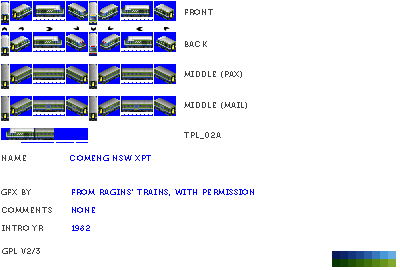
<style>
.page{position:relative;width:400px;height:270px;background:#ffffff}
.page>*{position:absolute;margin:0}
.t1{font:8px "Museo700-Regular";letter-spacing:0.075em;color:#404040;text-transform:uppercase}
.t2{font:8px "Museo700-Regular";letter-spacing:0.075em;color:#0000ff;text-transform:uppercase}
</style>
<div class="page">
<p class="t1" style="left:185px;top:9px;width:28px;height:6px">front</p>
<p class="t1" style="left:185px;top:41px;width:22px;height:6px">back</p>
<p class="t1" style="left:184px;top:71px;width:58px;height:7px">middle (pax)</p>
<p class="t1" style="left:184px;top:102px;width:63px;height:7px">middle (mail)</p>
<p class="t1" style="left:184px;top:132px;width:37px;height:7px">tpl_02a</p>
<p class="t1" style="left:2px;top:155px;width:24px;height:6px">name</p>
<p class="t2" style="left:70px;top:155px;width:81px;height:6px">Comeng NSW XPT</p>
<p class="t1" style="left:1px;top:189px;width:30px;height:6px">gfx by</p>
<p class="t2" style="left:72px;top:189px;width:182px;height:7px">from ragins' trains, with permission</p>
<p class="t1" style="left:2px;top:207px;width:50px;height:6px">comments</p>
<p class="t2" style="left:72px;top:207px;width:23px;height:6px">none</p>
<p class="t1" style="left:2px;top:225px;width:41px;height:6px">intro yr</p>
<p class="t2" style="left:72px;top:225px;width:18px;height:6px">1982</p>
<p class="t1" style="left:2px;top:248px;width:38px;height:6px">gpl v2/3</p>
</div>
